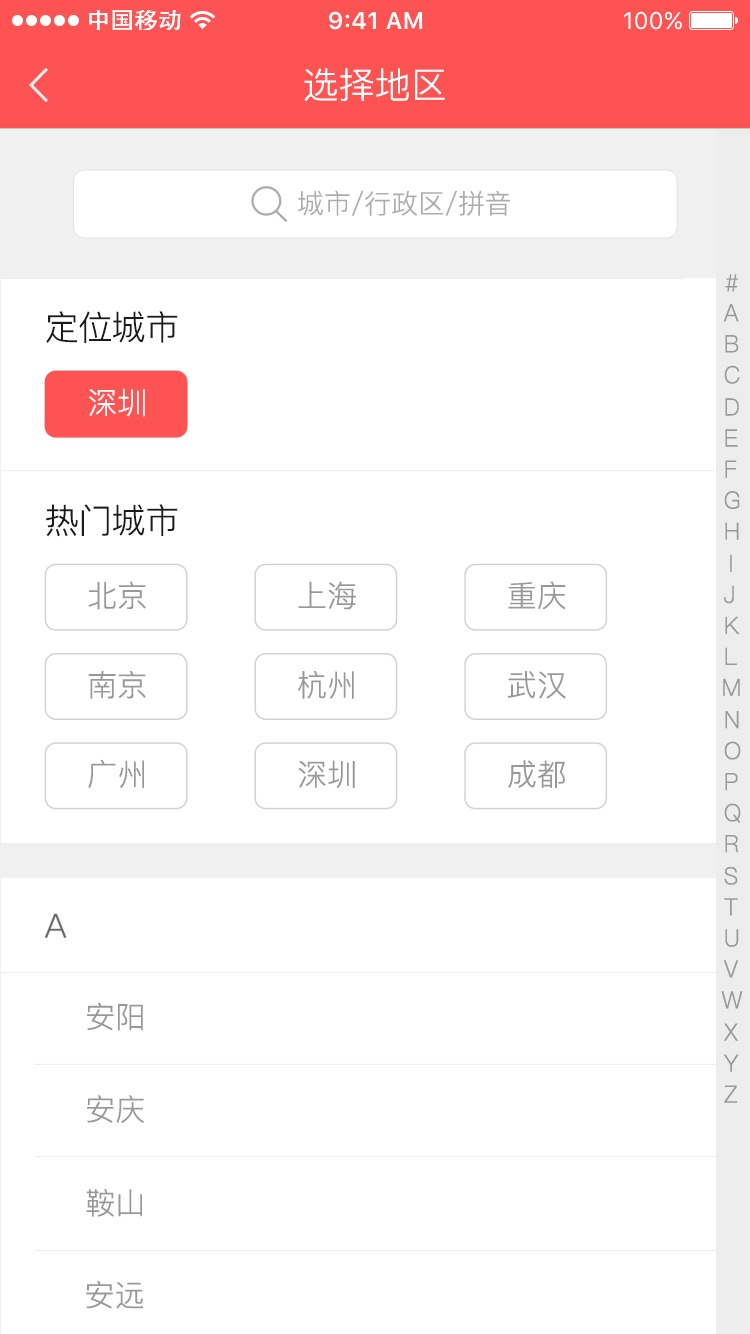
<style>
.page{position:relative;width:750px;height:1334px;background:#ffffff}
.page>*{position:absolute;margin:0}
.t1{font:36px "PingFang-SC-Regular";color:#ffffff}
.t2{font:26.8px "PingFang-SC-Regular";color:#acacac}
.t3{font:23.9px "PingFang-SC-Regular";color:#999999;scale:0.95 1}
.t4{font:34px "PingFang-SC-Regular";color:#1b1b1b}
.t5{font:30px "PingFang-SC-Regular";color:#fefefe}
.t6{font:23.9px "PingFang-SC-Regular";scale:0.95 1}
.t7{font:30px "PingFang-SC-Regular";color:#989898}
.t8{font:33.5px "PingFang-SC-Regular";color:#6a6a6a}
</style>
<div class="page">
<p class="t1" style="left:304px;top:68px;width:141px;height:34px">选择地区</p>
<p class="t2" style="left:298px;top:190px;width:212px;height:26px">城市/行政区/拼音</p>
<p class="t3" style="left:725px;top:274px;width:13px;height:18px">#</p>
<p class="t3" style="left:723px;top:304px;width:16px;height:18px">A</p>
<p class="t4" style="left:46px;top:311px;width:132px;height:32px">定位城市</p>
<p class="t3" style="left:725px;top:335px;width:14px;height:18px">B</p>
<p class="t3" style="left:724px;top:365px;width:16px;height:19px">C</p>
<p class="t5" style="left:88px;top:388px;width:57px;height:29px">深圳</p>
<p class="t3" style="left:725px;top:398px;width:14px;height:18px">D</p>
<p class="t3" style="left:725px;top:429px;width:13px;height:18px">E</p>
<p class="t3" style="left:725px;top:460px;width:12px;height:18px">F</p>
<p class="t3" style="left:724px;top:491px;width:16px;height:18px">G</p>
<p class="t4" style="left:46px;top:504px;width:132px;height:33px">热门城市</p>
<p class="t3" style="left:725px;top:522px;width:14px;height:18px">H</p>
<p class="t6" style="left:730px;top:554px;width:2px;height:18px">I</p>
<p class="t7" style="left:88px;top:581px;width:58px;height:29px">北京</p>
<p class="t7" style="left:298px;top:581px;width:58px;height:29px">上海</p>
<p class="t7" style="left:508px;top:581px;width:58px;height:29px">重庆</p>
<p class="t3" style="left:724px;top:585px;width:10px;height:19px">J</p>
<p class="t3" style="left:725px;top:616px;width:15px;height:18px">K</p>
<p class="t3" style="left:725px;top:647px;width:12px;height:18px">L</p>
<p class="t7" style="left:88px;top:670px;width:58px;height:29px">南京</p>
<p class="t7" style="left:298px;top:671px;width:56px;height:28px">杭州</p>
<p class="t7" style="left:508px;top:671px;width:58px;height:28px">武汉</p>
<p class="t3" style="left:723px;top:678px;width:17px;height:18px">M</p>
<p class="t3" style="left:725px;top:711px;width:14px;height:18px">N</p>
<p class="t3" style="left:724px;top:741px;width:17px;height:19px">O</p>
<p class="t7" style="left:88px;top:759px;width:56px;height:30px">广州</p>
<p class="t7" style="left:298px;top:760px;width:57px;height:29px">深圳</p>
<p class="t7" style="left:508px;top:760px;width:57px;height:28px">成都</p>
<p class="t3" style="left:725px;top:773px;width:13px;height:18px">P</p>
<p class="t3" style="left:724px;top:803px;width:17px;height:20px">Q</p>
<p class="t3" style="left:725px;top:835px;width:14px;height:18px">R</p>
<p class="t3" style="left:724px;top:867px;width:14px;height:18px">S</p>
<p class="t3" style="left:724px;top:898px;width:14px;height:18px">T</p>
<p class="t8" style="left:44px;top:913px;width:23px;height:25px">A</p>
<p class="t3" style="left:725px;top:929px;width:14px;height:18px">U</p>
<p class="t3" style="left:723px;top:960px;width:15px;height:18px">V</p>
<p class="t3" style="left:721px;top:991px;width:22px;height:18px">W</p>
<p class="t7" style="left:87px;top:1002px;width:56px;height:29px">安阳</p>
<p class="t3" style="left:723px;top:1023px;width:15px;height:18px">X</p>
<p class="t3" style="left:723px;top:1054px;width:16px;height:18px">Y</p>
<p class="t3" style="left:724px;top:1085px;width:14px;height:18px">Z</p>
<p class="t7" style="left:87px;top:1095px;width:57px;height:29px">安庆</p>
<p class="t7" style="left:86px;top:1189px;width:56px;height:28px">鞍山</p>
<p class="t7" style="left:86px;top:1281px;width:58px;height:28px">安远</p>
</div>
